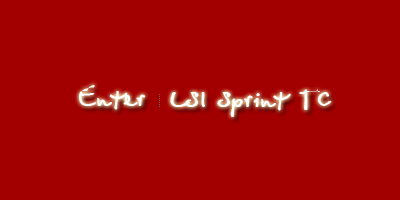
<style>
.page{position:relative;width:400px;height:200px;background:#a20000}
.page>*{position:absolute;margin:0}
.t1{font:30px "BetinaScriptBold";color:#ffffff}
</style>
<div class="page">
<p class="t1" style="left:79px;top:85px;width:67px;height:25px">Enter</p>
<p class="t1" style="left:170px;top:89px;width:162px;height:28px">LSI Sprint TC</p>
</div>
